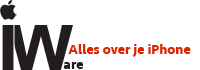
<style>
.page{position:relative;width:200px;height:70px;background:#ffffff}
.page>*{position:absolute;margin:0}
.t1{font:66.6px "Seravek-Bold";color:#221e20}
.t2{font:14px "Seravek-Bold";color:#da2703}
.t3{font:14.4px "Seravek-Bold";color:#221e20}
</style>
<div class="page">
<p class="t1" style="left:2px;top:25px;width:12px;height:45px">I</p>
<p class="t1" style="left:8px;top:25px;width:65px;height:45px">W</p>
<p class="t2" style="left:68px;top:44px;width:123px;height:13px">Alles over je iPhone</p>
<p class="t3" style="left:63px;top:62px;width:20px;height:7px">are</p>
</div>
